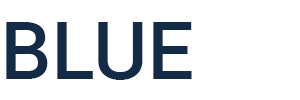
<style>
.page{position:relative;width:300px;height:100px;background:#ffffff}
.page>*{position:absolute;margin:0}
.t1{font:79.6px "Roboto-Medium";color:#132b47}
</style>
<div class="page">
<p class="t1" style="left:6px;top:22px;width:186px;height:58px">BLUE</p>
</div>
